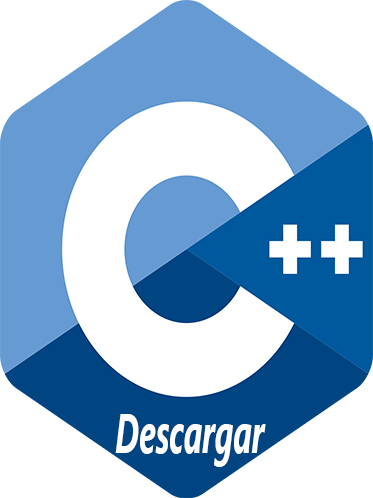
<style>
.page{position:relative;width:373px;height:498px;background:#ffffff}
.page>*{position:absolute;margin:0}
.t1{font:56.3px "SegoeUI-BoldItalic";color:#ffffff;scale:0.56 1}
</style>
<div class="page">
<p class="t1" style="left:115px;top:414px;width:151px;height:53px">Descargar</p>
</div>
